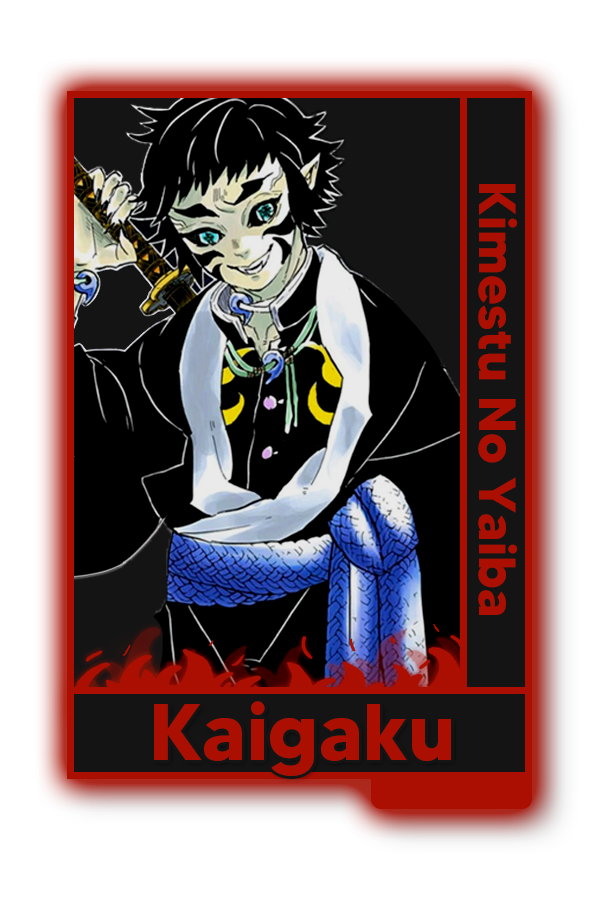
<style>
.page{position:relative;width:600px;height:900px;background:#ffffff}
.page>*{position:absolute;margin:0}
.t1{font:52px "MADETOMMY-Bold";color:#ab0f01}
.t2{font:79.9px "MADETOMMY-Bold";color:#ab0f01}
</style>
<div class="page">
<p class="t1" style="left:478px;top:184px;width:40px;height:431px;rotate:90deg">Kimestu No Yaiba</p>
<p class="t2" style="left:154px;top:701px;width:297px;height:75px">Kaigaku</p>
</div>
